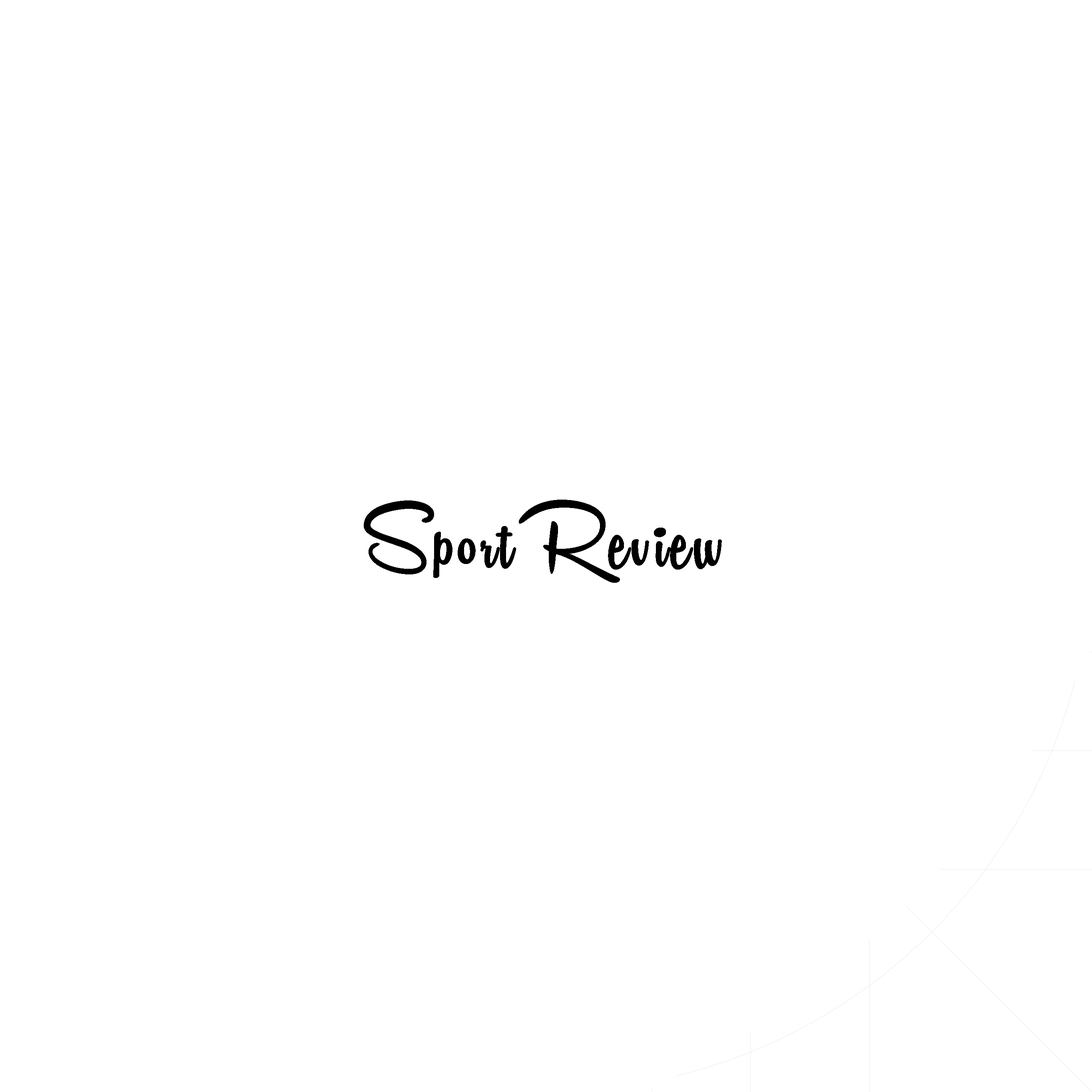
<style>
.page{position:relative;width:1092px;height:1092px;background:#ffffff}
.page>*{position:absolute;margin:0}
.t1{font:103.2px "RemachineScriptPersonalUseOnly";letter-spacing:0.04em;color:#000000;scale:0.85 1}
</style>
<div class="page">
<p class="t1" style="left:364px;top:500px;width:358px;height:83px">SportReview</p>
</div>
